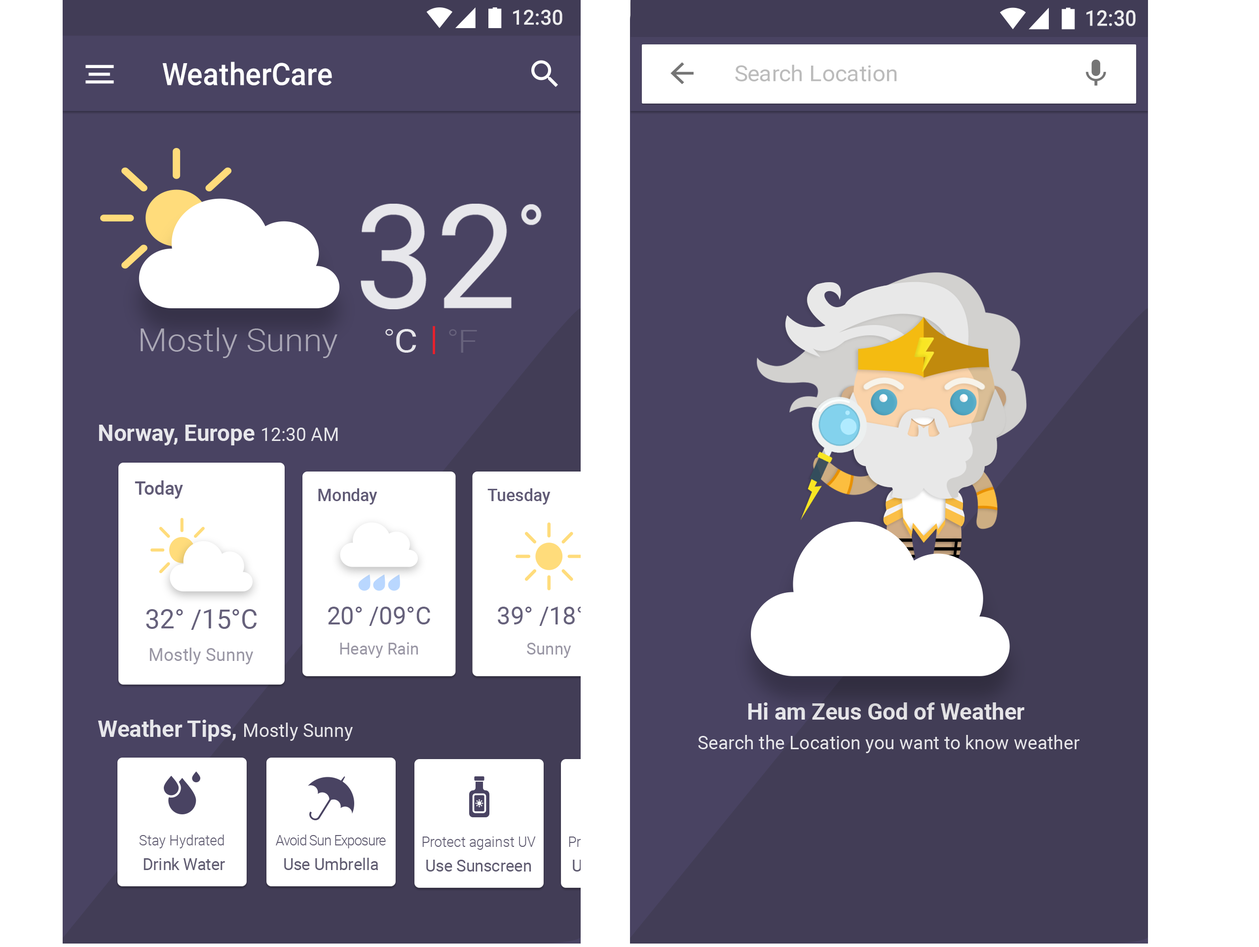
<style>
.page{position:relative;width:1259px;height:947px;background:#ffffff}
.page>*{position:absolute;margin:0}
.t1{font:20.7px "Roboto-Medium";color:#ececee}
.t2{font:21.6px "Roboto-Medium";color:#ececee;scale:0.93 1}
.t3{font:30.8px "Roboto-Medium";color:#ffffff;scale:0.95 1}
.t4{font:21.9px "Roboto-Regular";color:#bbbbbb;scale:1.05 1}
.t5{font:31.7px "Roboto-Light";color:#aba8b6;scale:1.07 1}
.t6{font:32.2px "Roboto-Regular";color:#ffffff;scale:1.12 1}
.t7{font:32.2px "Roboto-Light";color:#67627c;scale:1.12 1}
.t8{font:22.6px "Roboto-Bold";color:#ffffff}
.t9{font:18.5px "Roboto-Regular";color:#ffffff}
.t10{font:18.5px "Roboto-Medium";color:#494362}
.t11{font:17.1px "Roboto-Medium";color:#494362}
.t12{font:26.9px "Roboto-Regular";color:#66617b}
.t13{font:24.8px "Roboto-Regular";color:#66617b}
.t14{font:17.9px "Roboto-Regular";color:#9996a4}
.t15{font:16.5px "Roboto-Regular";color:#9996a4}
.t16{font:18.5px/29.6px "Roboto-Regular";color:#e7e6e9}
.t17{font:22.6px/29.6px "Roboto-Bold";color:#e7e6e9}
.t18{font:14.4px/24.7px "Roboto-Light";color:#605c71}
.t19{font:16.4px/24.7px "Roboto-Regular";color:#605c71}
.t20{font:14.4px/24.7px "Roboto-Light";letter-spacing:-0.05em;color:#605c71}
</style>
<div class="page">
<p class="t1" style="left:513px;top:9px;width:49px;height:16px">12:30</p>
<p class="t2" style="left:1086px;top:10px;width:50px;height:16px">12:30</p>
<p class="t3" style="left:162px;top:62px;width:170px;height:23px">WeatherCare</p>
<p class="t4" style="left:735px;top:65px;width:162px;height:16px">Search Location</p>
<p class="t5" style="left:141px;top:328px;width:196px;height:30px">Mostly Sunny</p>
<p class="t6" style="left:396px;top:329px;width:20px;height:24px;opacity:0.87">C</p>
<p class="t7" style="left:461px;top:330px;width:16px;height:23px">F</p>
<p class="t8" style="left:99px;top:425px;width:239px;height:20px;opacity:0.87">Norway, Europe <span class="t9">12:30 AM</span></p>
<p class="t10" style="left:135px;top:480px;width:48px;height:19px;opacity:0.87">Today</p>
<p class="t11" style="left:318px;top:488px;width:59px;height:17px;opacity:0.87">Monday</p>
<p class="t11" style="left:487px;top:488px;width:64px;height:17px;opacity:0.87">Tuesday</p>
<p class="t12" style="left:146px;top:609px;width:111px;height:21px">32° /15°C</p>
<p class="t13" style="left:328px;top:607px;width:102px;height:19px">20° /09°C</p>
<p class="t13" style="left:498px;top:607px;width:102px;height:19px">39° /18°C</p>
<p class="t14" style="left:149px;top:648px;width:105px;height:16px">Mostly Sunny</p>
<p class="t15" style="left:340px;top:642px;width:78px;height:16px">Heavy Rain</p>
<p class="t15" style="left:527px;top:643px;width:44px;height:15px">Sunny</p>
<p class="t16" style="left:698px;top:702px;width:381px;height:51px;text-align:center"><span class="t17">Hi am Zeus God of Weather <br></span>Search the Location you want to know weather</p>
<p class="t8" style="left:98px;top:720px;width:255px;height:21px;opacity:0.87">Weather Tips, <span class="t9">Mostly Sunny</span></p>
<p class="t18" style="left:139px;top:835px;width:86px;height:35px;text-align:center">Stay Hydrated<br><span class="t19"> Drink Water</span></p>
<p class="t20" style="left:276px;top:835px;width:110px;height:35px;text-align:center">Avoid Sun Exposure<br><span class="t19">Use Umbrella</span></p>
<p class="t18" style="left:422px;top:837px;width:114px;height:35px;text-align:center">Protect against UV<br><span class="t19">Use Sunscreen</span></p>
</div>
